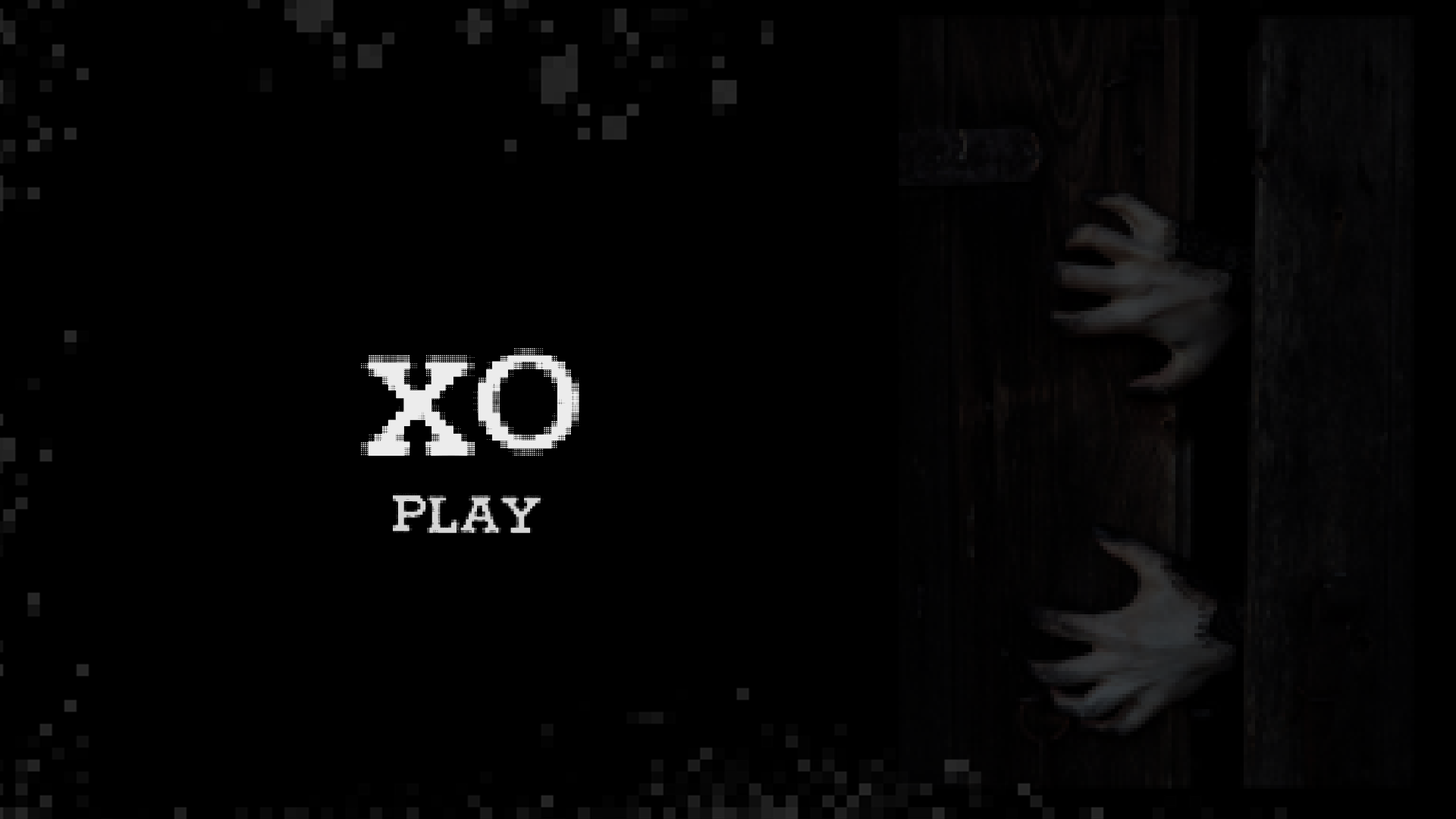
<style>
.page{position:relative;width:1456px;height:819px;background:#000000}
.page>*{position:absolute;margin:0}
.t1{font:151.7px "HigherPixels";color:#ececec}
.t2{font:56.9px "HigherPixels";color:#d6d6d6}
</style>
<div class="page">
<p class="t1" style="left:361px;top:348px;width:218px;height:108px">XO</p>
<p class="t2" style="left:393px;top:493px;width:151px;height:40px">PLAY</p>
</div>
